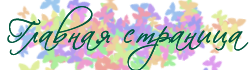
<style>
.page{position:relative;width:250px;height:70px;background:#ffffff}
.page>*{position:absolute;margin:0}
.t1{font:30px/14px "Scriptorama";letter-spacing:0.025em;color:#01583f;font-weight:bold}
</style>
<div class="page">
<p class="t1" style="left:7px;top:6px;width:242px;height:66px;text-align:center">Главная страница</p>
</div>
